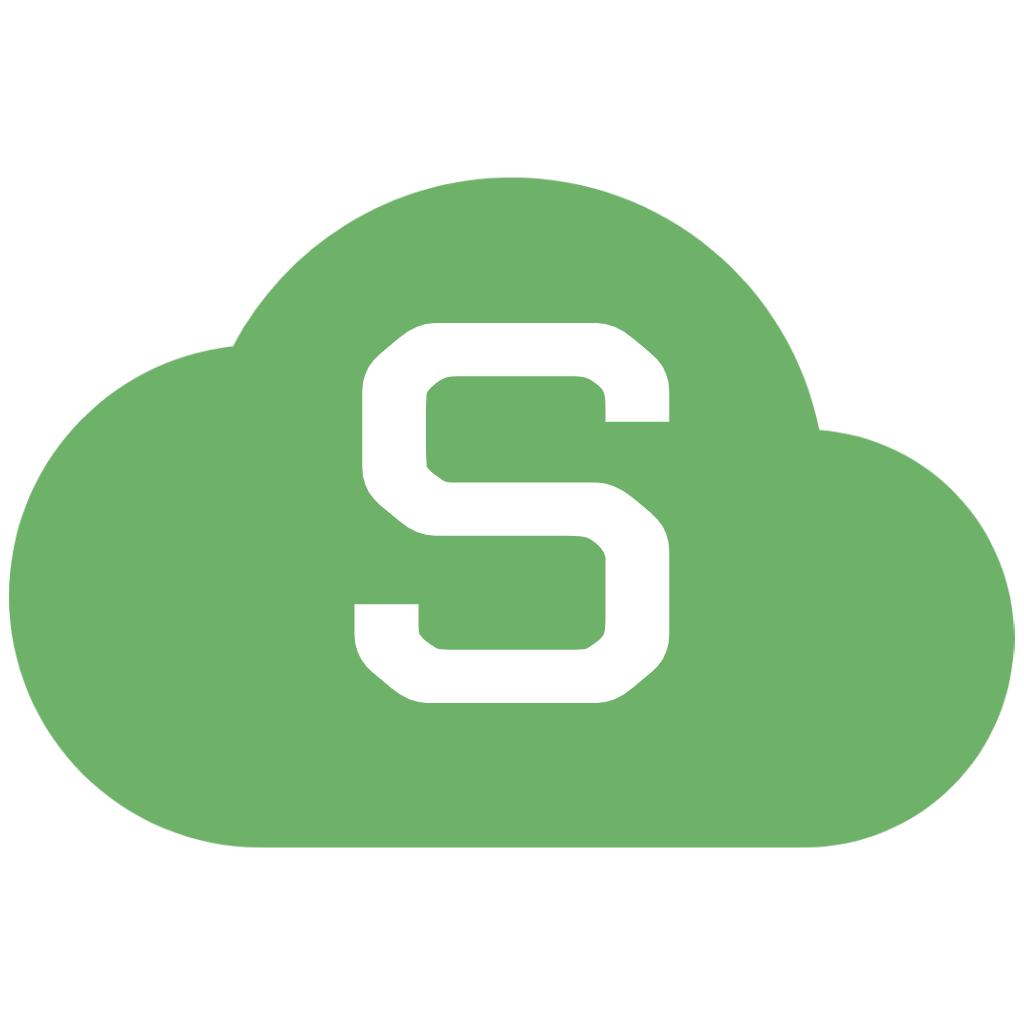
<style>
.page{position:relative;width:1024px;height:1024px;background:#ffffff}
.page>*{position:absolute;margin:0}
.t1{font:760px "Electrolize-Regular";color:#ffffff}
</style>
<div class="page">
<p class="t1" style="left:354px;top:322px;width:316px;height:381px">s</p>
</div>
